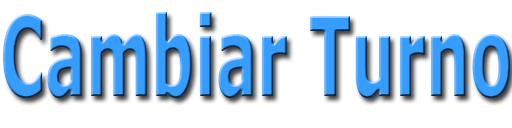
<style>
.page{position:relative;width:512px;height:128px;background:#ffffff}
.page>*{position:absolute;margin:0}
.t1{font:109.7px "Verdana-Bold";color:#359dfe;scale:0.56 1}
</style>
<div class="page">
<p class="t1" style="left:3px;top:12px;width:507px;height:86px">Cambiar Turno</p>
</div>
